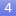
<style>
.page{position:relative;width:16px;height:16px}
.page>*{position:absolute;margin:0}
.t1{font:13px "SegoeUI";letter-spacing:0.06em;color:#ffffff}
</style>
<div class="page">
<p class="t1" style="left:4px;top:3px;width:8px;height:9px">4</p>
</div>
